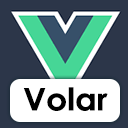
<style>
.page{position:relative;width:128px;height:128px;background:#2c3649}
.page>*{position:absolute;margin:0}
.t1{font:31.2px "CenturyGothic-Bold";color:#000000;scale:1.06 1}
</style>
<div class="page">
<p class="t1" style="left:23px;top:87px;width:85px;height:24px">Volar</p>
</div>
